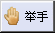
<style>
.page{position:relative;width:55px;height:33px;background:#dee2f4}
.page>*{position:absolute;margin:0}
.t1{font:12px "NSimSun";color:#000000}
</style>
<div class="page">
<p class="t1" style="left:25px;top:11px;width:23px;height:11px">举手</p>
</div>
